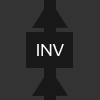
<style>
.page{position:relative;width:100px;height:100px;background:#333333}
.page>*{position:absolute;margin:0}
.t1{font:18px "Ubuntu-Light";color:#ffffff}
</style>
<div class="page">
<p class="t1" style="left:37px;top:44px;width:27px;height:12px">INV</p>
</div>
